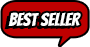
<style>
.page{position:relative;width:90px;height:47px;background:#be0000}
.page>*{position:absolute;margin:0}
.t1{font:18px "Bangers-Regular";color:#ffffff}
</style>
<div class="page">
<p class="t1" style="left:8px;top:12px;width:73px;height:14px">best seller</p>
</div>
